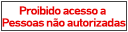
<style>
.page{position:relative;width:128px;height:32px;background:#ffffff}
.page>*{position:absolute;margin:0}
.t1{font:12px/12px "DINNextLTPro-Medium";letter-spacing:-0.07em;color:#ea0404;scale:1.11 1}
</style>
<div class="page">
<p class="t1" style="left:2px;top:6px;width:124px;height:21px;text-align:center">Proibido acesso a <br>Pessoas não autorizadas</p>
</div>
